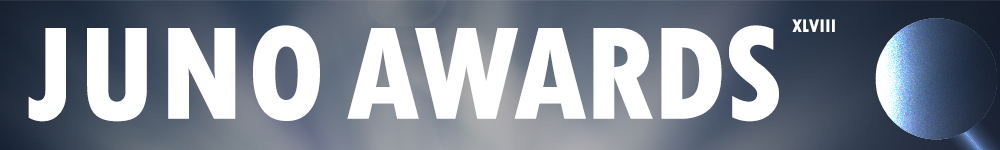
<style>
.page{position:relative;width:1000px;height:150px;background:#ffffff}
.page>*{position:absolute;margin:0}
.t1{font:139px "TwCenMT-CondensedExtraBold";letter-spacing:-0.02em;color:#ffffff}
.t2{font:139px "TwCenMT-CondensedExtraBold";letter-spacing:0.02em;color:#ffffff}
.t3{font:19px "TwCenMT-CondensedExtraBold";color:#ffffff}
</style>
<div class="page">
<p class="t1" style="left:28px;top:25px;width:751px;height:97px"><span class="t2">JUNO </span>AWARDS</p>
<p class="t3" style="left:792px;top:19px;width:43px;height:13px">XLVIII</p>
</div>
